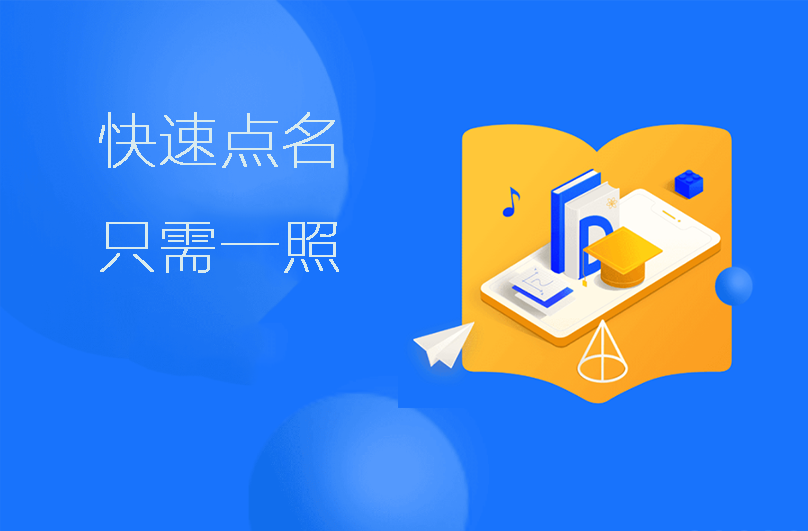
<style>
.page{position:relative;width:808px;height:531px;background:#1873fc}
.page>*{position:absolute;margin:0}
.t1{font:60px "FZLTCXHJW--GB1-0";color:#d8ebef;font-weight:bold}
</style>
<div class="page">
<p class="t1" style="left:99px;top:112px;width:240px;height:161px;text-align:center">快速点名<br>只需一照</p>
</div>
